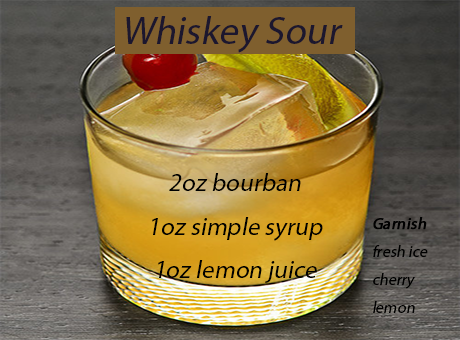
<style>
.page{position:relative;width:460px;height:340px}
.page>*{position:absolute;margin:0}
.t1{font:39px "MyriadPro-Regular";color:#1c172e;font-style:italic}
.t2{font:25px "MyriadPro-Regular";color:#000000;font-style:italic}
.t3{font:16px "MyriadPro-Regular";color:#000000;font-style:italic}
.t4{font:16px "MyriadPro-Regular";color:#000000;font-weight:bold;font-style:italic}
</style>
<div class="page">
<p class="t1" style="left:126px;top:16px;width:217px;height:37px">Whiskey Sour</p>
<p class="t2" style="left:152px;top:173px;width:171px;height:110px;text-align:center">2oz bourban<br>1oz simple syrup<br>1oz lemon juice</p>
<p class="t3" style="left:373px;top:217px;width:55px;height:96px"><span class="t4">Garnish<br></span>fresh ice <br>cherry <br>lemon</p>
</div>
